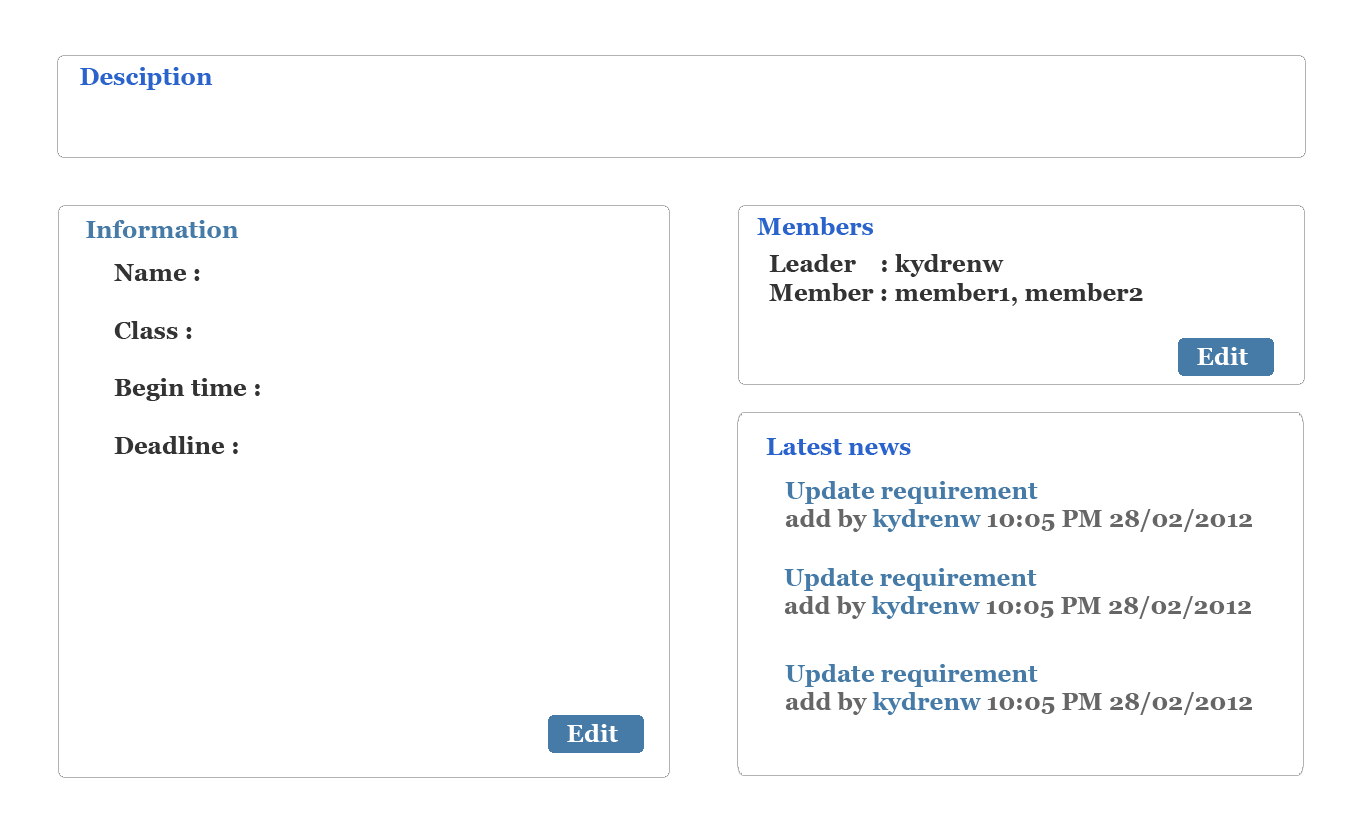
<style>
.page{position:relative;width:1366px;height:838px;background:#ffffff}
.page>*{position:absolute;margin:0}
.t1{font:24px "Vani-Bold";color:#2a63cc}
.t2{font:24px "Vani-Bold";color:#467aa7}
.t3{font:24px "Vani-Bold";color:#333333}
.t4{font:24px "Vani-Bold";color:#ffffff}
.t5{font:24px "Vani-Bold";color:#666666}
</style>
<div class="page">
<p class="t1" style="left:80px;top:67px;width:133px;height:23px">Desciption</p>
<p class="t2" style="left:86px;top:220px;width:153px;height:18px">Information</p>
<p class="t1" style="left:757px;top:217px;width:116px;height:18px">Members</p>
<p class="t3" style="left:769px;top:254px;width:374px;height:52px">Leader    : kydrenw<br>Member : member1, member2</p>
<p class="t3" style="left:114px;top:264px;width:146px;height:190px">Name :<br><br>Class :<br><br>Begin time :<br><br>Deadline :</p>
<p class="t4" style="left:1197px;top:347px;width:51px;height:18px">Edit</p>
<p class="t1" style="left:766px;top:438px;width:145px;height:17px">Latest news</p>
<p class="t5" style="left:785px;top:481px;width:467px;height:51px"><span class="t2">Update requirement<br></span>add by <span class="t2">kydrenw </span>10:05 PM 28/02/2012</p>
<p class="t5" style="left:784px;top:568px;width:467px;height:51px"><span class="t2">Update requirement<br></span>add by <span class="t2">kydrenw </span>10:05 PM 28/02/2012</p>
<p class="t5" style="left:785px;top:664px;width:467px;height:51px"><span class="t2">Update requirement<br></span>add by <span class="t2">kydrenw </span>10:05 PM 28/02/2012</p>
<p class="t4" style="left:567px;top:724px;width:51px;height:18px">Edit</p>
</div>
